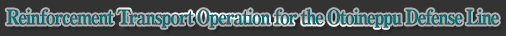
<style>
.page{position:relative;width:506px;height:36px;background:#333333}
.page>*{position:absolute;margin:0}
.t1{font:20px "RyuminPro-ExBold";letter-spacing:-0.08em;color:#006d72;scale:0.9 1}
</style>
<div class="page">
<p class="t1" style="left:6px;top:9px;width:493px;height:19px">Reinforcement Transport Operation for the Otoineppu Defense Line</p>
</div>
